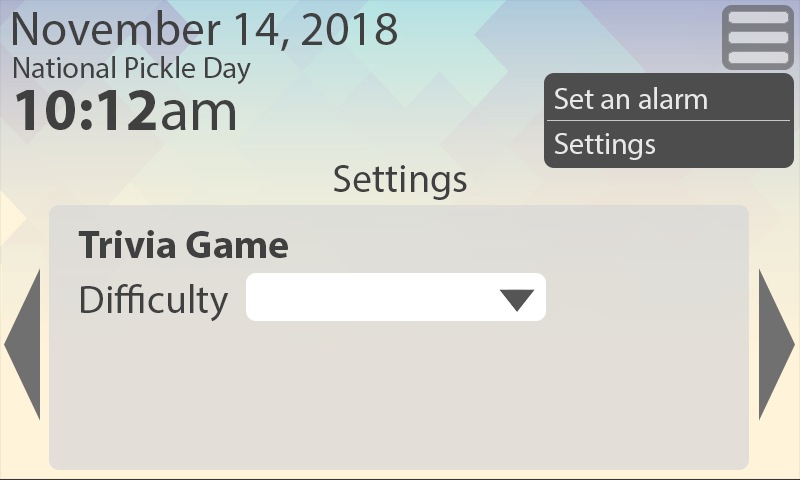
<style>
.page{position:relative;width:800px;height:480px;background:#e3dfd8}
.page>*{position:absolute;margin:0}
.t1{font:48px "MyriadPro-Regular";color:#404040}
.t2{font:30px "MyriadPro-Regular";color:#404040}
.t3{font:30px "MyriadPro-Regular";color:#e8e8e8}
.t4{font:60px "MyriadPro-Bold";color:#404040}
.t5{font:60px "MyriadPro-Regular";color:#404040}
.t6{font:40px "MyriadPro-Regular";color:#404040}
.t7{font:40px "MyriadPro-Bold";color:#404040}
</style>
<div class="page">
<p class="t1" style="left:13px;top:10px;width:384px;height:41px">November 14, 2018</p>
<p class="t2" style="left:14px;top:56px;width:237px;height:29px">National Pickle Day</p>
<p class="t3" style="left:554px;top:87px;width:153px;height:22px">Set an alarm</p>
<p class="t4" style="left:16px;top:90px;width:219px;height:40px">10:12<span class="t5">am</span></p>
<p class="t3" style="left:554px;top:133px;width:101px;height:27px">Settings</p>
<p class="t6" style="left:334px;top:165px;width:133px;height:35px">Settings</p>
<p class="t7" style="left:78px;top:230px;width:210px;height:28px">Trivia Game</p>
<p class="t6" style="left:81px;top:284px;width:148px;height:38px">Difficulty</p>
</div>
